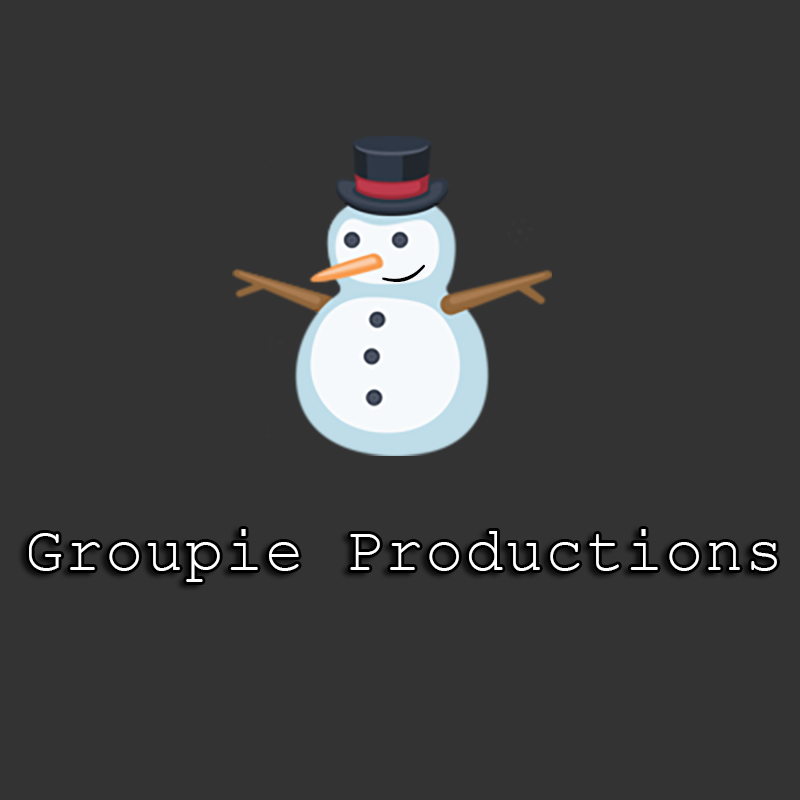
<style>
.page{position:relative;width:800px;height:800px;background:#333333}
.page>*{position:absolute;margin:0}
.t1{font:60.8px "CourierNewPSMT";letter-spacing:0.025em;color:#000000}
.t2{font:64px "CourierNewPSMT";letter-spacing:0.025em;color:#ffffff}
</style>
<div class="page">
<p class="t1" style="left:382px;top:264px;width:43px;height:18px;rotate:73deg">)</p>
<p class="t2" style="left:29px;top:529px;width:748px;height:53px">Groupie Productions</p>
</div>
